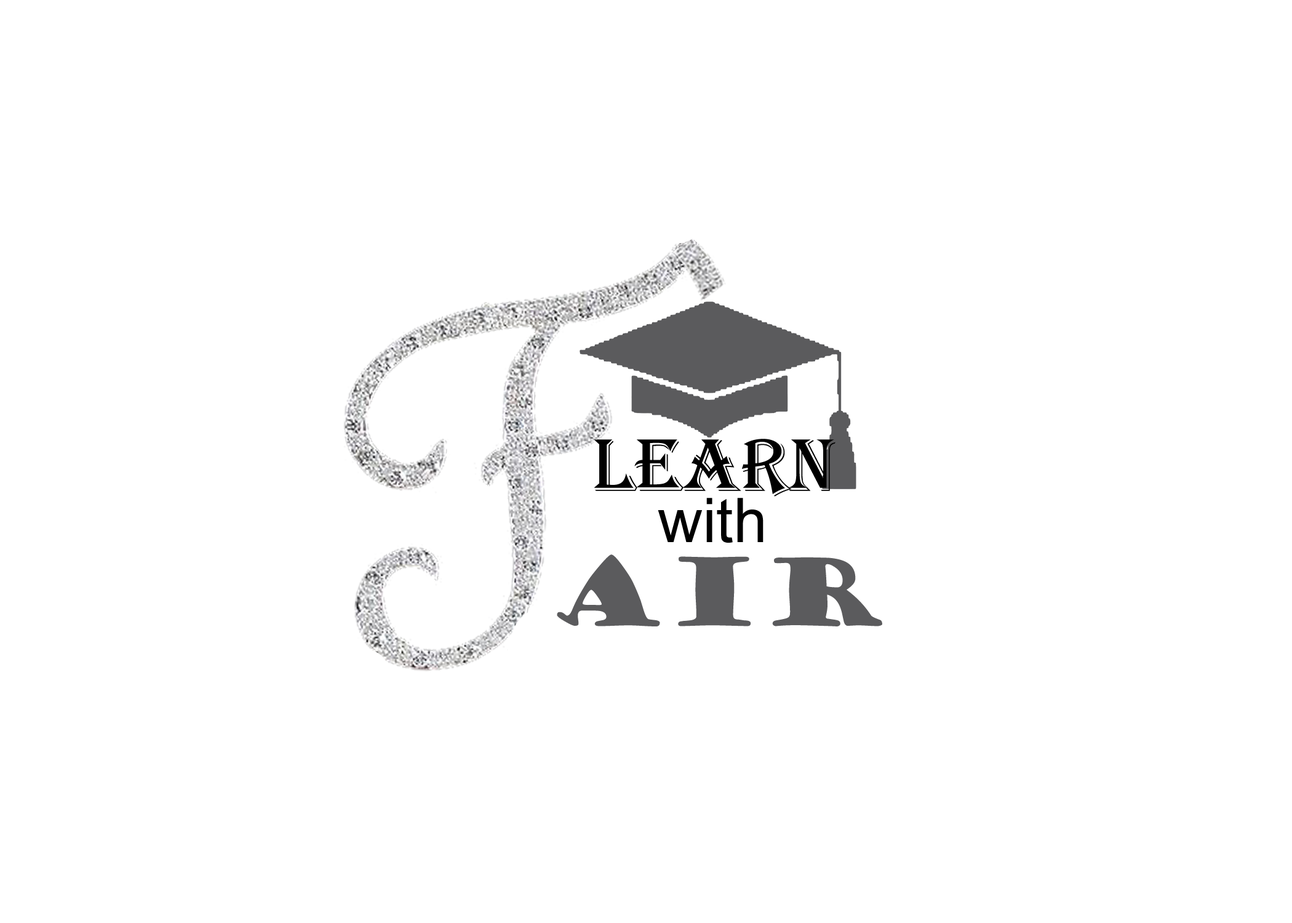
<style>
.page{position:relative;width:1292px;height:923px;background:#ffffff}
.page>*{position:absolute;margin:0}
.t1{font:76.9px "Algerian";color:#000000}
.t2{font:61.5px "ArialMT";color:#000000}
.t3{font:92.3px "GoudyStout";color:#5b5b5d}
</style>
<div class="page">
<p class="t1" style="left:594px;top:439px;width:242px;height:58px">LEARN</p>
<p class="t2" style="left:658px;top:498px;width:106px;height:45px">with</p>
<p class="t3" style="left:557px;top:554px;width:325px;height:72px">air</p>
</div>
